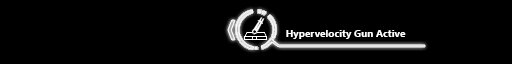
<style>
.page{position:relative;width:512px;height:64px;background:#000000}
.page>*{position:absolute;margin:0}
.t1{font:10px "LeelawadeeUI-Bold";color:#ffffff}
</style>
<div class="page">
<p class="t1" style="left:286px;top:30px;width:120px;height:9px">Hypervelocity Gun Active</p>
</div>
